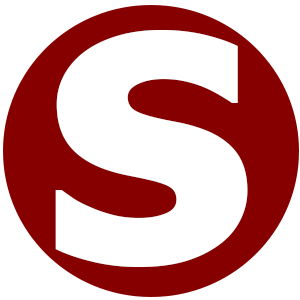
<style>
.page{position:relative;width:300px;height:300px;background:#ffffff}
.page>*{position:absolute;margin:0}
.t1{font:408.1px "Tahoma-Bold";color:#ffffff}
</style>
<div class="page">
<p class="t1" style="left:55px;top:29px;width:193px;height:238px">s</p>
</div>
